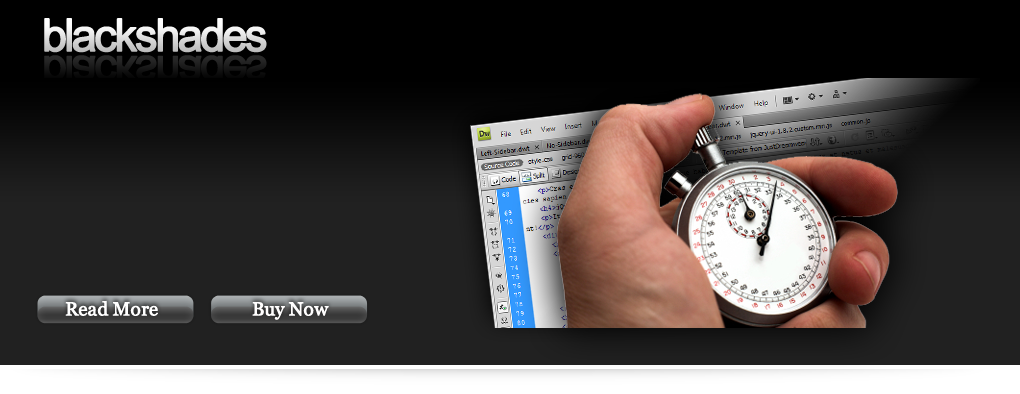
<style>
.page{position:relative;width:1020px;height:394px;background:#212121}
.page>*{position:absolute;margin:0}
.t1{font:45px "ArialMT";letter-spacing:-0.08em;font-weight:bold}
.t2{font:44.3px "ArialMT";letter-spacing:-0.08em;color:#161616;font-weight:bold}
.t3{font:18.8px "Georgia";letter-spacing:-0.01em;color:#ffffff;font-weight:bold}
.t4{font:18.8px "Georgia";letter-spacing:-0.01em;color:#fffefe;font-weight:bold}
</style>
<div class="page">
<p class="t1" style="left:44px;top:18px;width:223px;height:35px">blackshades</p>
<p class="t2" style="left:44px;top:55px;width:223px;height:34px">blackshades</p>
<p class="t3" style="left:65px;top:300px;width:93px;height:16px">Read More</p>
<p class="t4" style="left:252px;top:302px;width:77px;height:18px">Buy Now</p>
</div>
